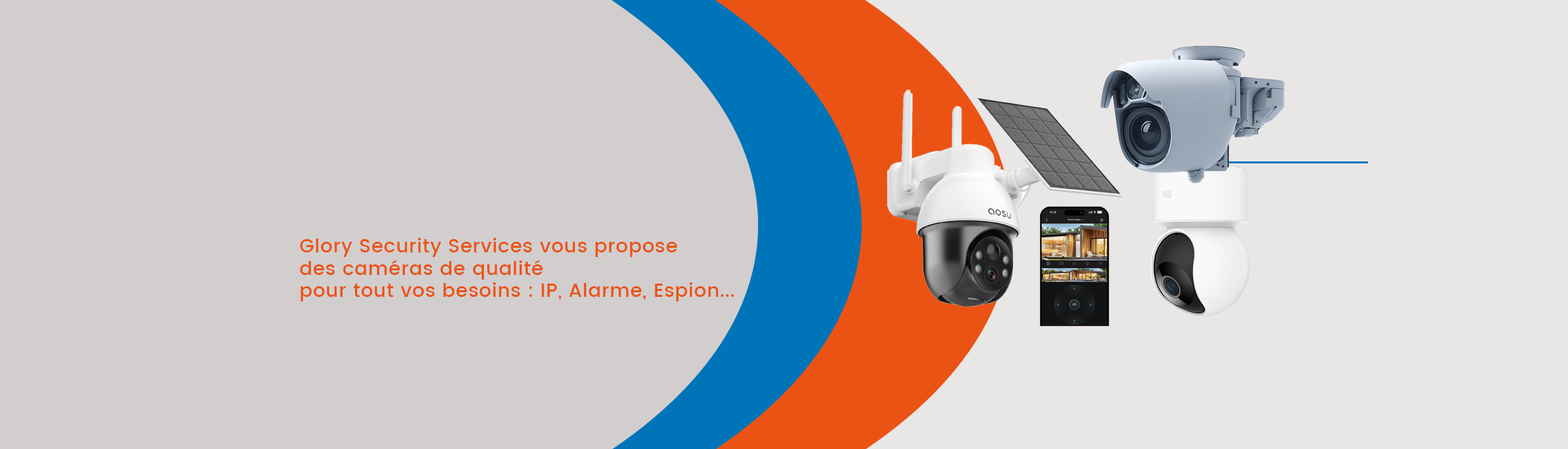
<style>
.page{position:relative;width:1568px;height:449px;background:#d2cece}
.page>*{position:absolute;margin:0}
.t1{font:19.4px/22.1px "Poppins-Medium";letter-spacing:0.025em;color:#eb5314}
</style>
<div class="page">
<p class="t1" style="left:300px;top:238px;width:434px;height:63px">Glory Security Services vous propose<br>des caméras de qualité<br>pour tout vos besoins : IP, Alarme, Espion...</p>
</div>
